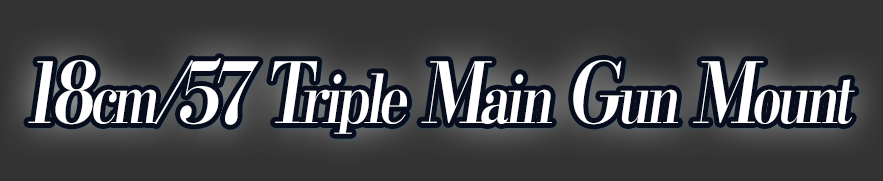
<style>
.page{position:relative;width:883px;height:181px;background:#333333}
.page>*{position:absolute;margin:0}
.t1{font:84px "KochoStd-Heavy";letter-spacing:-0.08em;color:#ffffff;font-style:italic;scale:0.81 1}
.t2{font:67.2px "KochoStd-Heavy";letter-spacing:-0.08em;color:#ffffff;font-style:italic;scale:0.81 1}
</style>
<div class="page">
<p class="t1" style="left:28px;top:58px;width:827px;height:76px">18<span class="t2">cm</span>/57 T<span class="t2">riple</span> M<span class="t2">ain</span> G<span class="t2">un</span> M<span class="t2">ount</span></p>
</div>
